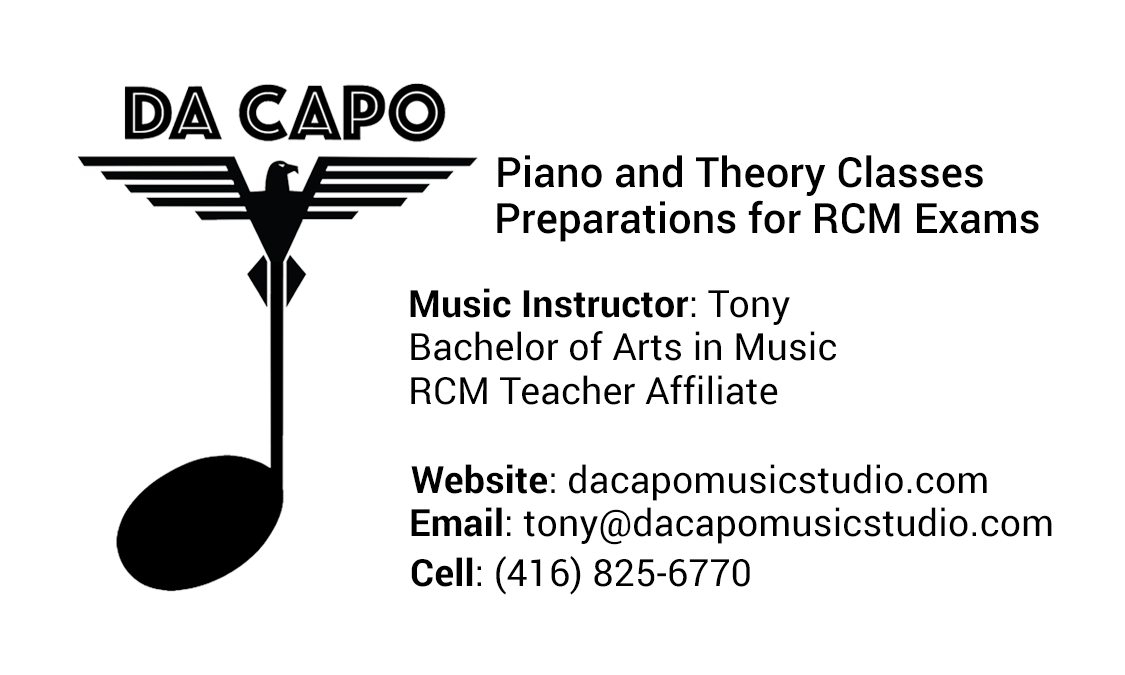
<style>
.page{position:relative;width:1125px;height:675px;background:#ffffff}
.page>*{position:absolute;margin:0}
.t1{font:41.7px "Roboto-Medium";letter-spacing:0.005em;color:#000000}
.t2{font:37.5px "Roboto-Bold";letter-spacing:0.005em;color:#000000}
.t3{font:37.5px "Roboto-Regular";letter-spacing:0.005em;color:#000000}
</style>
<div class="page">
<p class="t1" style="left:498px;top:155px;width:485px;height:41px">Piano and Theory Classes</p>
<p class="t1" style="left:497px;top:200px;width:542px;height:42px">Preparations for RCM Exams</p>
<p class="t2" style="left:410px;top:288px;width:380px;height:37px">Music Instructor<span class="t3">: Tony</span></p>
<p class="t3" style="left:411px;top:331px;width:425px;height:30px">Bachelor of Arts in Music</p>
<p class="t3" style="left:411px;top:375px;width:367px;height:30px">RCM Teacher Affiliate</p>
<p class="t3" style="left:411px;top:464px;width:576px;height:37px"><span class="t2">Website</span>: dacapomusicstudio.com</p>
<p class="t3" style="left:411px;top:507px;width:641px;height:38px"><span class="t2">Email</span>: tony@dacapomusicstudio.com</p>
<p class="t3" style="left:411px;top:556px;width:339px;height:39px"><span class="t2">Cell</span>: (416) 825-6770</p>
</div>
